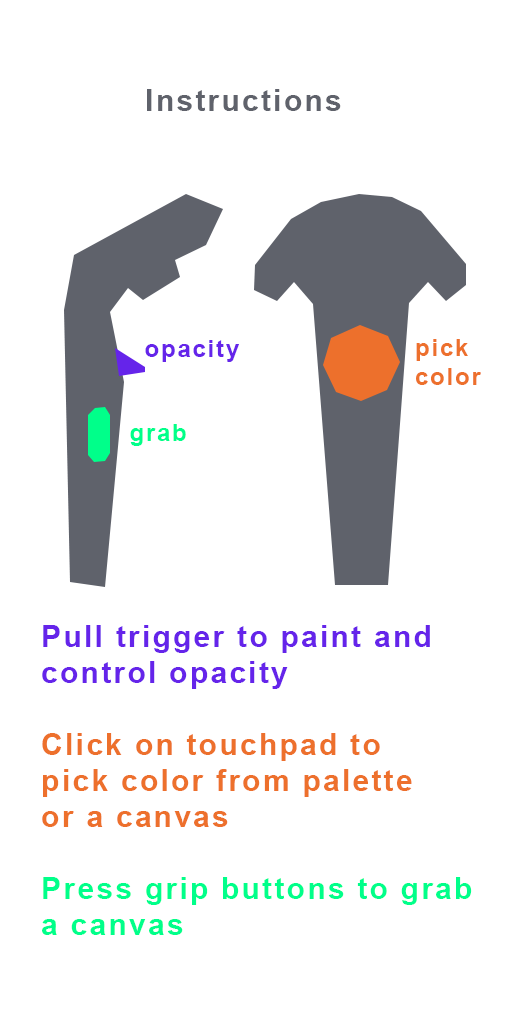
<style>
.page{position:relative;width:512px;height:1024px;background:#ffffff}
.page>*{position:absolute;margin:0}
.t1{font:30px "Arial-BoldMT";letter-spacing:0.075em;color:#5f626b}
.t2{font:24px "Arial-BoldMT";letter-spacing:0.075em;color:#6524ea}
.t3{font:24px "Arial-BoldMT";letter-spacing:0.075em;color:#ed702c}
.t4{font:24px "Arial-BoldMT";letter-spacing:0.075em;color:#00ff8a}
.t5{font:30px "Arial-BoldMT";letter-spacing:0.075em;color:#ed702c}
.t6{font:30px "Arial-BoldMT";letter-spacing:0.075em;color:#6524ea}
.t7{font:30px "Arial-BoldMT";letter-spacing:0.075em;color:#00ff8a}
</style>
<div class="page">
<p class="t1" style="left:147px;top:89px;width:194px;height:22px">Instructions</p>
<p class="t2" style="left:145px;top:340px;width:94px;height:22px">opacity</p>
<p class="t3" style="left:416px;top:339px;width:65px;height:46px">pick<br>color</p>
<p class="t4" style="left:130px;top:424px;width:56px;height:22px">grab</p>
<p class="t5" style="left:42px;top:625px;width:430px;height:310px"><span class="t6">Pull trigger to paint and<br>control opacity<br></span><br>Click on touchpad to<br>pick color from palette<br>or a canvas<br><span class="t7"><br>Press grip buttons to grab<br>a canvas</span></p>
</div>
